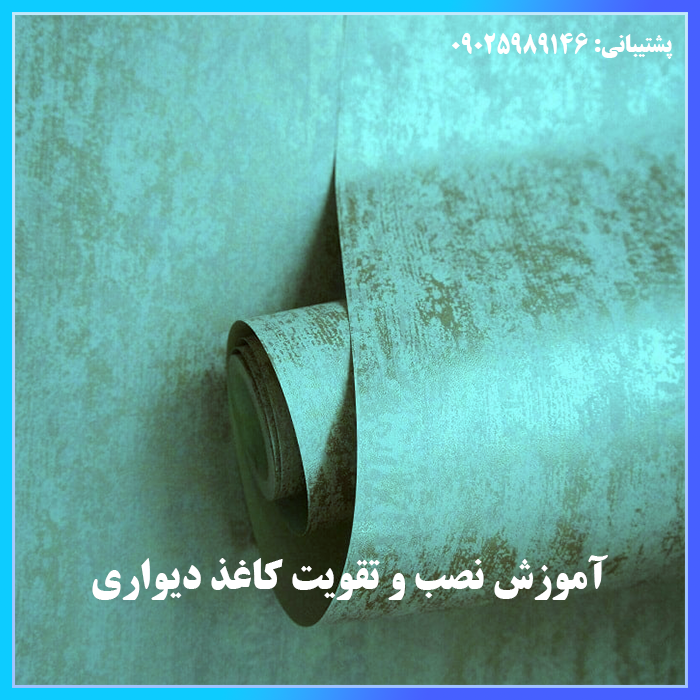
<style>
.page{position:relative;width:700px;height:700px}
.page>*{position:absolute;margin:0}
.t1{font:24px "BTitrBold";color:#ffffff;text-transform:uppercase}
.t2{font:42px "BTitrBold";color:#ffffff;text-transform:uppercase}
</style>
<div class="page">
<p class="t1" style="left:452px;top:33px;width:221px;height:26px">پشتیبانی: 09025989146</p>
<p class="t2" style="left:92px;top:555px;width:516px;height:45px">آموزش نصب و تقویت کاغذ دیواری</p>
</div>
